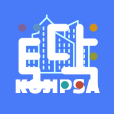
<style>
.page{position:relative;width:114px;height:114px;background:#497af8}
.page>*{position:absolute;margin:0}
.t1{font:18px "BlackHanSans-Regular";letter-spacing:0.05em;color:#ffffff}
</style>
<div class="page">
<p class="t1" style="left:15px;top:79px;width:85px;height:15px">KOJIPSA</p>
</div>
